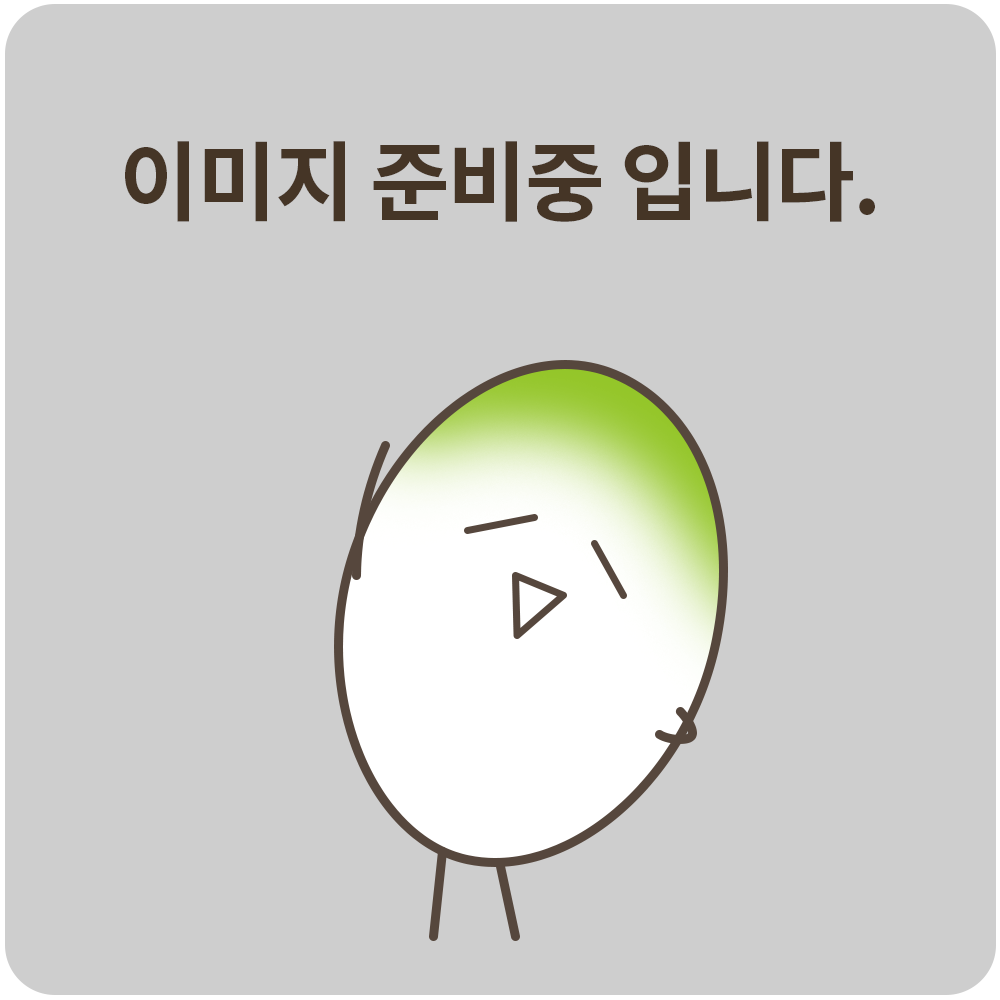
<style>
.page{position:relative;width:1000px;height:1000px;background:#cecece}
.page>*{position:absolute;margin:0}
.t1{font:86.7px "NotoSansKR-Bold";letter-spacing:-0.025em;color:#453526}
</style>
<div class="page">
<p class="t1" style="left:125px;top:141px;width:750px;height:81px">이미지 준비중 입니다.</p>
</div>
